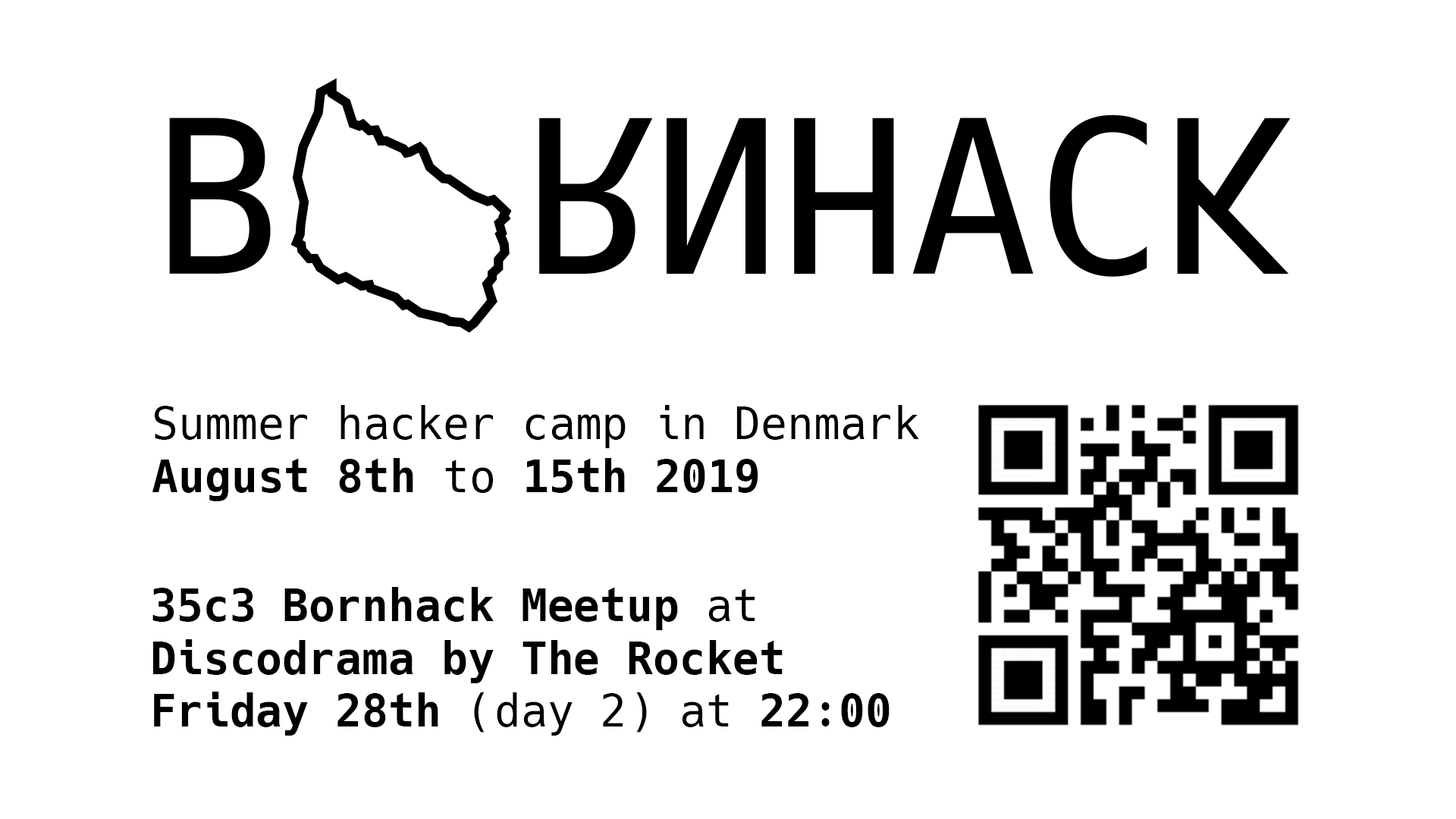
<style>
.page{position:relative;width:1456px;height:819px;background:#ffffff}
.page>*{position:absolute;margin:0}
.t1{font:44px "Hack-Regular";color:#000000}
.t2{font:44px "Hack-Bold";color:#000000}
</style>
<div class="page">
<p class="t1" style="left:152px;top:405px;width:767px;height:96px">Summer hacker camp in Denmark<br><span class="t2">August 8th</span> to <span class="t2">15th 2019</span></p>
<p class="t2" style="left:152px;top:587px;width:738px;height:149px">35c3 Bornhack Meetup<span class="t1"> at<br></span>Discodrama by The Rocket<br>Friday 28th<span class="t1"> (day 2) at </span>22:00</p>
</div>
